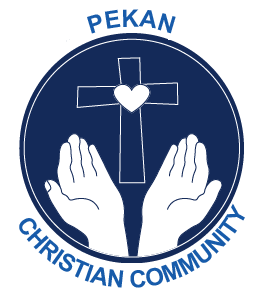
<style>
.page{position:relative;width:265px;height:298px;background:#ffffff}
.page>*{position:absolute;margin:0}
.t1{font:24px "Arial-BoldMT";color:#175baa}
.t2{font:23.9px "Arial-BoldMT";color:#175baa}
</style>
<div class="page">
<p class="t1" style="left:87px;top:9px;width:89px;height:25px">PEKAN</p>
<p class="t2" style="left:19px;top:203px;width:226px;height:85px;text-align:center">CHRISTIAN COMMUNITY</p>
</div>
